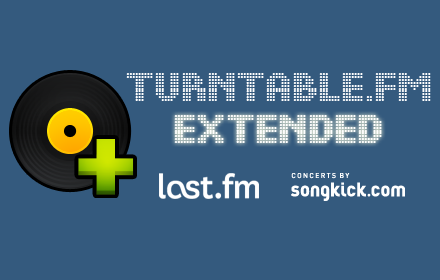
<style>
.page{position:relative;width:440px;height:280px;background:#345a7e}
.page>*{position:absolute;margin:0}
.t1{font:36px "DSDots-Medium";color:#ffffff}
</style>
<div class="page">
<p class="t1" style="left:126px;top:73px;width:305px;height:28px">Turntable.fM</p>
<p class="t1" style="left:174px;top:115px;width:208px;height:28px">Extended</p>
</div>
